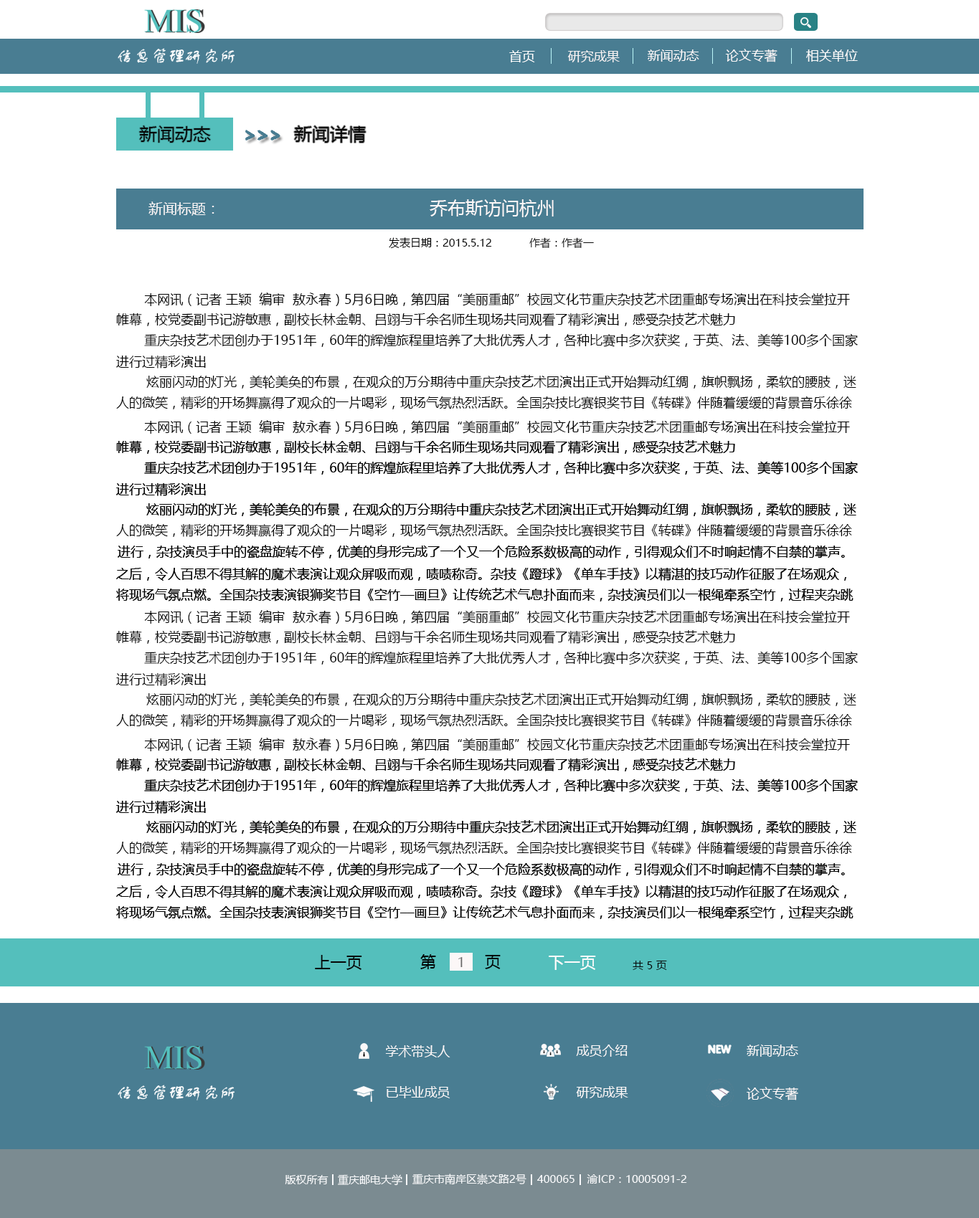
<style>
.page{position:relative;width:979px;height:1218px;background:#ffffff}
.page>*{position:absolute;margin:0}
.t1{font:12.9px "MicrosoftYaHei";color:#fefefe}
.t2{font:12.9px "MicrosoftYaHei";color:#f8f4f4}
.t3{font:12.9px "MicrosoftYaHei";color:#fefafa}
.t4{font:12.9px "MicrosoftYaHei";color:#fcf9f9}
.t5{font:12.9px "MicrosoftYaHei";color:#fdfcfc}
.t6{font:17.9px "MicrosoftYaHei";color:#060606}
.t7{font:17.9px "MicrosoftYaHei";color:#050505}
.t8{font:14.3px "MicrosoftYaHei";color:#fcf7f7}
.t9{font:17.9px "MicrosoftYaHei";color:#fef8f8}
.t10{font:10.8px "MicrosoftYaHei";color:#020202}
.t11{font:10.8px "MicrosoftYaHei";color:#0a0a0a}
.t12{font:12.9px "MicrosoftYaHei";color:#050505}
.t13{font:15.8px "MicrosoftYaHei";color:#060606}
.t14{font:15.8px "MicrosoftYaHei";color:#020202}
.t15{font:12.9px "MicrosoftYaHei";color:#686767}
.t16{font:15.8px "MicrosoftYaHei";color:#f9fafc}
.t17{font:10.8px "MicrosoftYaHei";color:#060606}
.t18{font:12.9px "MicrosoftYaHei";color:#fbf8f8}
.t19{font:12.9px "MicrosoftYaHei";color:#fcfafa}
.t20{font:12.9px "MicrosoftYaHei";color:#fdf8f8}
.t21{font:10.8px "MicrosoftYaHei";color:#f9fafc}
</style>
<div class="page">
<p class="t1" style="left:509px;top:50px;width:26px;height:12px">首页</p>
<p class="t2" style="left:567px;top:50px;width:53px;height:12px">研究成果</p>
<p class="t3" style="left:648px;top:49px;width:51px;height:13px">新闻动态</p>
<p class="t4" style="left:725px;top:49px;width:52px;height:13px">论文专著</p>
<p class="t5" style="left:806px;top:49px;width:52px;height:13px">相关单位</p>
<p class="t6" style="left:139px;top:125px;width:72px;height:18px">新闻动态</p>
<p class="t7" style="left:294px;top:125px;width:72px;height:18px">新闻详情</p>
<p class="t8" style="left:148px;top:201px;width:66px;height:15px">新闻标题：</p>
<p class="t9" style="left:430px;top:199px;width:124px;height:18px">乔布斯访问杭州</p>
<p class="t10" style="left:389px;top:237px;width:103px;height:12px">发表日期：2015.5.12</p>
<p class="t11" style="left:529px;top:237px;width:65px;height:11px">作者：作者一</p>
<p class="t12" style="left:144px;top:293px;width:706px;height:13px">本网讯（记者 王颖  编审  敖永春）5月6日晚，第四届“美丽重邮”校园文化节重庆杂技艺术团重邮专场演出在科技会堂拉开</p>
<p class="t12" style="left:116px;top:313px;width:619px;height:13px">帷幕，校党委副书记游敏惠，副校长林金朝、吕翊与千余名师生现场共同观看了精彩演出，感受杂技艺术魅力</p>
<p class="t12" style="left:144px;top:333px;width:714px;height:14px">重庆杂技艺术团创办于1951年，60年的辉煌旅程里培养了大批优秀人才，各种比赛中多次获奖，于英、法、美等100多个国家</p>
<p class="t12" style="left:116px;top:356px;width:90px;height:13px">进行过精彩演出</p>
<p class="t12" style="left:146px;top:375px;width:710px;height:14px">炫丽闪动的灯光，美轮美奂的布景，在观众的万分期待中重庆杂技艺术团演出正式开始舞动红绸，旗帜飘扬，柔软的腰肢，迷</p>
<p class="t12" style="left:116px;top:396px;width:736px;height:13px">人的微笑，精彩的开场舞赢得了观众的一片喝彩，现场气氛热烈活跃。全国杂技比赛银奖节目《转碟》伴随着缓缓的背景音乐徐徐</p>
<p class="t12" style="left:144px;top:420px;width:706px;height:14px">本网讯（记者 王颖  编审  敖永春）5月6日晚，第四届“美丽重邮”校园文化节重庆杂技艺术团重邮专场演出在科技会堂拉开</p>
<p class="t12" style="left:116px;top:440px;width:619px;height:14px">帷幕，校党委副书记游敏惠，副校长林金朝、吕翊与千余名师生现场共同观看了精彩演出，感受杂技艺术魅力</p>
<p class="t12" style="left:116px;top:440px;width:619px;height:14px">帷幕，校党委副书记游敏惠，副校长林金朝、吕翊与千余名师生现场共同观看了精彩演出，感受杂技艺术魅力</p>
<p class="t12" style="left:144px;top:461px;width:714px;height:14px">重庆杂技艺术团创办于1951年，60年的辉煌旅程里培养了大批优秀人才，各种比赛中多次获奖，于英、法、美等100多个国家</p>
<p class="t12" style="left:144px;top:461px;width:714px;height:14px">重庆杂技艺术团创办于1951年，60年的辉煌旅程里培养了大批优秀人才，各种比赛中多次获奖，于英、法、美等100多个国家</p>
<p class="t12" style="left:116px;top:483px;width:90px;height:13px">进行过精彩演出</p>
<p class="t12" style="left:116px;top:483px;width:90px;height:13px">进行过精彩演出</p>
<p class="t12" style="left:146px;top:503px;width:710px;height:13px">炫丽闪动的灯光，美轮美奂的布景，在观众的万分期待中重庆杂技艺术团演出正式开始舞动红绸，旗帜飘扬，柔软的腰肢，迷</p>
<p class="t12" style="left:146px;top:503px;width:710px;height:13px">炫丽闪动的灯光，美轮美奂的布景，在观众的万分期待中重庆杂技艺术团演出正式开始舞动红绸，旗帜飘扬，柔软的腰肢，迷</p>
<p class="t12" style="left:116px;top:523px;width:736px;height:14px">人的微笑，精彩的开场舞赢得了观众的一片喝彩，现场气氛热烈活跃。全国杂技比赛银奖节目《转碟》伴随着缓缓的背景音乐徐徐</p>
<p class="t12" style="left:118px;top:545px;width:727px;height:14px">进行，杂技演员手中的瓷盘旋转不停，优美的身形完成了一个又一个危险系数极高的动作，引得观众们不时响起情不自禁的掌声。</p>
<p class="t12" style="left:118px;top:545px;width:727px;height:14px">进行，杂技演员手中的瓷盘旋转不停，优美的身形完成了一个又一个危险系数极高的动作，引得观众们不时响起情不自禁的掌声。</p>
<p class="t12" style="left:116px;top:568px;width:730px;height:13px">之后，令人百思不得其解的魔术表演让观众屏吸而观，啧啧称奇。杂技《蹬球》《单车手技》以精湛的技巧动作征服了在场观众，</p>
<p class="t12" style="left:116px;top:568px;width:730px;height:13px">之后，令人百思不得其解的魔术表演让观众屏吸而观，啧啧称奇。杂技《蹬球》《单车手技》以精湛的技巧动作征服了在场观众，</p>
<p class="t12" style="left:116px;top:588px;width:737px;height:14px">将现场气氛点燃。全国杂技表演银狮奖节目《空竹––画旦》让传统艺术气息扑面而来，杂技演员们以一根绳牵系空竹，过程夹杂跳</p>
<p class="t12" style="left:116px;top:588px;width:737px;height:14px">将现场气氛点燃。全国杂技表演银狮奖节目《空竹––画旦》让传统艺术气息扑面而来，杂技演员们以一根绳牵系空竹，过程夹杂跳</p>
<p class="t12" style="left:144px;top:610px;width:706px;height:14px">本网讯（记者 王颖  编审  敖永春）5月6日晚，第四届“美丽重邮”校园文化节重庆杂技艺术团重邮专场演出在科技会堂拉开</p>
<p class="t12" style="left:116px;top:630px;width:619px;height:14px">帷幕，校党委副书记游敏惠，副校长林金朝、吕翊与千余名师生现场共同观看了精彩演出，感受杂技艺术魅力</p>
<p class="t12" style="left:144px;top:651px;width:714px;height:14px">重庆杂技艺术团创办于1951年，60年的辉煌旅程里培养了大批优秀人才，各种比赛中多次获奖，于英、法、美等100多个国家</p>
<p class="t12" style="left:116px;top:673px;width:90px;height:13px">进行过精彩演出</p>
<p class="t12" style="left:146px;top:693px;width:710px;height:13px">炫丽闪动的灯光，美轮美奂的布景，在观众的万分期待中重庆杂技艺术团演出正式开始舞动红绸，旗帜飘扬，柔软的腰肢，迷</p>
<p class="t12" style="left:116px;top:713px;width:736px;height:14px">人的微笑，精彩的开场舞赢得了观众的一片喝彩，现场气氛热烈活跃。全国杂技比赛银奖节目《转碟》伴随着缓缓的背景音乐徐徐</p>
<p class="t12" style="left:144px;top:738px;width:706px;height:13px">本网讯（记者 王颖  编审  敖永春）5月6日晚，第四届“美丽重邮”校园文化节重庆杂技艺术团重邮专场演出在科技会堂拉开</p>
<p class="t12" style="left:116px;top:758px;width:619px;height:14px">帷幕，校党委副书记游敏惠，副校长林金朝、吕翊与千余名师生现场共同观看了精彩演出，感受杂技艺术魅力</p>
<p class="t12" style="left:116px;top:758px;width:619px;height:14px">帷幕，校党委副书记游敏惠，副校长林金朝、吕翊与千余名师生现场共同观看了精彩演出，感受杂技艺术魅力</p>
<p class="t12" style="left:144px;top:779px;width:714px;height:13px">重庆杂技艺术团创办于1951年，60年的辉煌旅程里培养了大批优秀人才，各种比赛中多次获奖，于英、法、美等100多个国家</p>
<p class="t12" style="left:144px;top:779px;width:714px;height:13px">重庆杂技艺术团创办于1951年，60年的辉煌旅程里培养了大批优秀人才，各种比赛中多次获奖，于英、法、美等100多个国家</p>
<p class="t12" style="left:116px;top:801px;width:90px;height:13px">进行过精彩演出</p>
<p class="t12" style="left:116px;top:801px;width:90px;height:13px">进行过精彩演出</p>
<p class="t12" style="left:146px;top:820px;width:710px;height:14px">炫丽闪动的灯光，美轮美奂的布景，在观众的万分期待中重庆杂技艺术团演出正式开始舞动红绸，旗帜飘扬，柔软的腰肢，迷</p>
<p class="t12" style="left:146px;top:820px;width:710px;height:14px">炫丽闪动的灯光，美轮美奂的布景，在观众的万分期待中重庆杂技艺术团演出正式开始舞动红绸，旗帜飘扬，柔软的腰肢，迷</p>
<p class="t12" style="left:116px;top:841px;width:736px;height:14px">人的微笑，精彩的开场舞赢得了观众的一片喝彩，现场气氛热烈活跃。全国杂技比赛银奖节目《转碟》伴随着缓缓的背景音乐徐徐</p>
<p class="t12" style="left:118px;top:863px;width:727px;height:13px">进行，杂技演员手中的瓷盘旋转不停，优美的身形完成了一个又一个危险系数极高的动作，引得观众们不时响起情不自禁的掌声。</p>
<p class="t12" style="left:118px;top:863px;width:727px;height:13px">进行，杂技演员手中的瓷盘旋转不停，优美的身形完成了一个又一个危险系数极高的动作，引得观众们不时响起情不自禁的掌声。</p>
<p class="t12" style="left:116px;top:886px;width:730px;height:12px">之后，令人百思不得其解的魔术表演让观众屏吸而观，啧啧称奇。杂技《蹬球》《单车手技》以精湛的技巧动作征服了在场观众，</p>
<p class="t12" style="left:116px;top:886px;width:730px;height:12px">之后，令人百思不得其解的魔术表演让观众屏吸而观，啧啧称奇。杂技《蹬球》《单车手技》以精湛的技巧动作征服了在场观众，</p>
<p class="t12" style="left:116px;top:906px;width:737px;height:13px">将现场气氛点燃。全国杂技表演银狮奖节目《空竹––画旦》让传统艺术气息扑面而来，杂技演员们以一根绳牵系空竹，过程夹杂跳</p>
<p class="t12" style="left:116px;top:906px;width:737px;height:13px">将现场气氛点燃。全国杂技表演银狮奖节目《空竹––画旦》让传统艺术气息扑面而来，杂技演员们以一根绳牵系空竹，过程夹杂跳</p>
<p class="t13" style="left:315px;top:955px;width:47px;height:15px">上一页</p>
<p class="t14" style="left:420px;top:954px;width:16px;height:15px">第</p>
<p class="t15" style="left:458px;top:957px;width:5px;height:10px">1</p>
<p class="t14" style="left:485px;top:955px;width:16px;height:14px">页</p>
<p class="t16" style="left:549px;top:956px;width:47px;height:14px">下一页</p>
<p class="t17" style="left:632px;top:961px;width:35px;height:9px">共 5 页</p>
<p class="t18" style="left:385px;top:1045px;width:65px;height:13px">学术带头人</p>
<p class="t18" style="left:576px;top:1045px;width:51px;height:12px">成员介绍</p>
<p class="t19" style="left:746px;top:1045px;width:52px;height:12px">新闻动态</p>
<p class="t18" style="left:386px;top:1086px;width:64px;height:13px">已毕业成员</p>
<p class="t18" style="left:576px;top:1086px;width:52px;height:13px">研究成果</p>
<p class="t20" style="left:746px;top:1087px;width:52px;height:14px">论文专著</p>
<p class="t21" style="left:285px;top:1175px;width:43px;height:10px">版权所有</p>
<p class="t21" style="left:338px;top:1175px;width:64px;height:11px">重庆邮电大学</p>
<p class="t21" style="left:412px;top:1174px;width:114px;height:11px">重庆市南岸区崇文路2号</p>
<p class="t21" style="left:537px;top:1175px;width:37px;height:8px">400065</p>
<p class="t21" style="left:587px;top:1175px;width:100px;height:9px">渝ICP：10005091-2</p>
</div>
